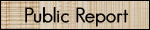
<style>
.page{position:relative;width:150px;height:30px}
.page>*{position:absolute;margin:0}
.t1{font:20px "GeosansLight";color:#000000;font-weight:bold}
</style>
<div class="page">
<p class="t1" style="left:25px;top:7px;width:104px;height:20px">Public Report</p>
</div>
